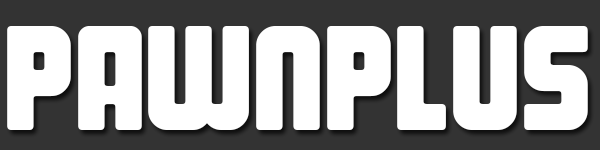
<style>
.page{position:relative;width:600px;height:150px;background:#ffffff}
.page>*{position:absolute;margin:0}
.t1{font:150px "Magnum";color:#ffffff}
</style>
<div class="page">
<p class="t1" style="left:7px;top:26px;width:581px;height:104px">PawnPlus</p>
</div>
